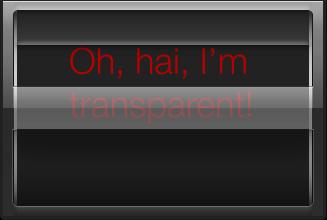
<style>
.page{position:relative;width:327px;height:220px}
.page>*{position:absolute;margin:0}
.t1{font:36px "HelveticaNeue-Light"}
</style>
<div class="page">
<p class="t1" style="left:69px;top:47px;width:182px;height:77px">Oh, hai, I’m <br>transparent!</p>
</div>
